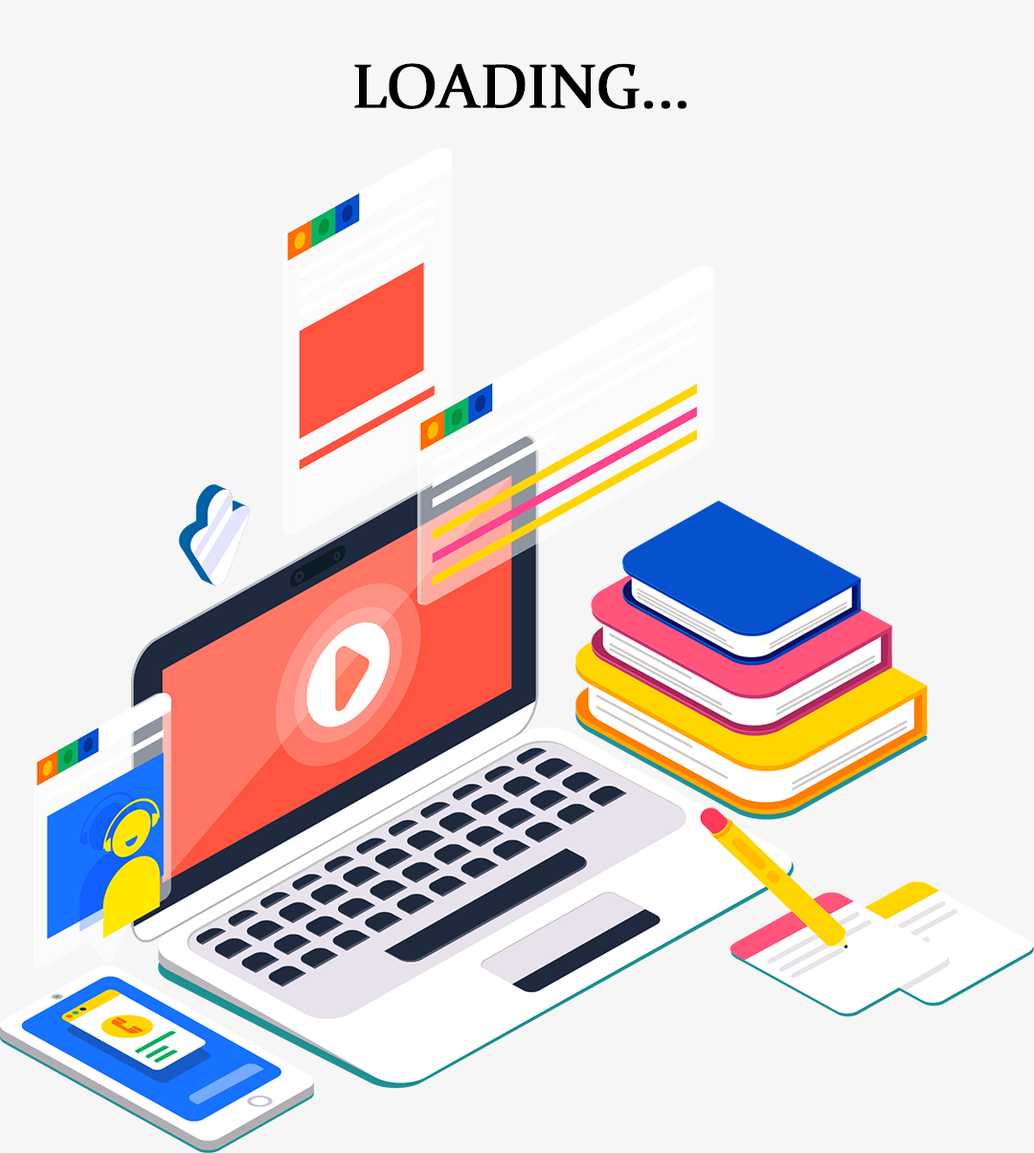
<style>
.page{position:relative;width:1034px;height:1153px;background:#f6f6f6}
.page>*{position:absolute;margin:0}
.t1{font:62.4px "Constantia";letter-spacing:-0.02em;color:#000000;text-transform:uppercase;font-weight:bold}
</style>
<div class="page">
<p class="t1" style="left:354px;top:63px;width:332px;height:46px">Loading...</p>
</div>
